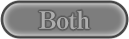
<style>
.page{position:relative;width:129px;height:39px;background:#7d7d7d}
.page>*{position:absolute;margin:0}
.t1{font:24px "RyuminPro-ExBold";letter-spacing:-0.04em;color:#acadae}
</style>
<div class="page">
<p class="t1" style="left:39px;top:10px;width:51px;height:20px">Both</p>
</div>
